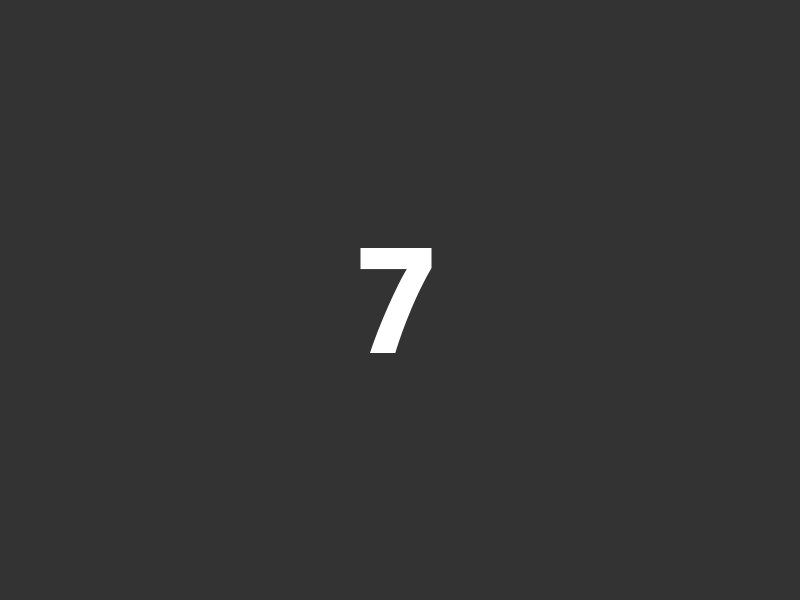
<style>
.page{position:relative;width:800px;height:600px;background:#333333}
.page>*{position:absolute;margin:0}
.t1{font:166.7px "Effra-Bold";color:#ffffff}
</style>
<div class="page">
<p class="t1" style="left:360px;top:248px;width:72px;height:105px">7</p>
</div>
